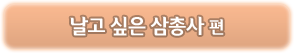
<style>
.page{position:relative;width:294px;height:53px}
.page>*{position:absolute;margin:0}
.t1{font:20px "AuctionGothicBold";letter-spacing:-0.06em;color:#ffffff}
.t2{font:17px "AuctionGothicBold";letter-spacing:-0.06em;color:#ffffff}
</style>
<div class="page">
<p class="t1" style="left:70px;top:16px;width:154px;height:20px">날고 싶은 삼총사 <span class="t2">편</span></p>
</div>
